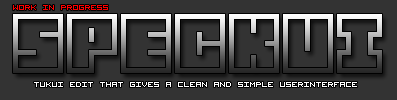
<style>
.page{position:relative;width:397px;height:100px;background:#333333}
.page>*{position:absolute;margin:0}
.t1{font:10px "VisitorTT1BRK";color:#ff0000;text-transform:uppercase}
.t2{font:72px "Blocked";text-transform:uppercase}
.t3{font:10px "VisitorTT1BRK";color:#ffffff;text-transform:uppercase}
</style>
<div class="page">
<p class="t1" style="left:13px;top:5px;width:95px;height:5px">work in progress</p>
<p class="t2" style="left:13px;top:14px;width:369px;height:59px">SpeckUI</p>
<p class="t3" style="left:34px;top:82px;width:323px;height:5px">tukui edit that gives a Clean and simple userinterface</p>
</div>
